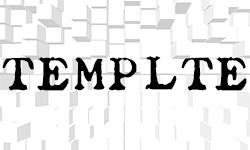
<style>
.page{position:relative;width:250px;height:150px;background:#ffffff}
.page>*{position:absolute;margin:0}
.t1{font:63.4px "zaiAdler7Typewriter1925";color:#000000;scale:0.96 1}
</style>
<div class="page">
<p class="t1" style="left:2px;top:56px;width:245px;height:35px">TEMPLTE</p>
</div>
